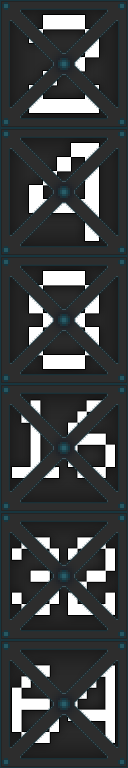
<style>
.page{position:relative;width:128px;height:768px;background:#2d2d2d}
.page>*{position:absolute;margin:0}
.t1{font:112px "Minecraftia"}
.t2{font:88.4px "Minecraftia";scale:0.85 1}
</style>
<div class="page">
<p class="t1" style="left:29px;top:15px;width:70px;height:98px">2</p>
<p class="t1" style="left:29px;top:143px;width:70px;height:98px">4</p>
<p class="t1" style="left:29px;top:271px;width:70px;height:98px">8</p>
<p class="t2" style="left:12px;top:400px;width:103px;height:78px">16</p>
<p class="t2" style="left:12px;top:537px;width:103px;height:78px">32</p>
<p class="t2" style="left:12px;top:665px;width:103px;height:78px">64</p>
</div>
